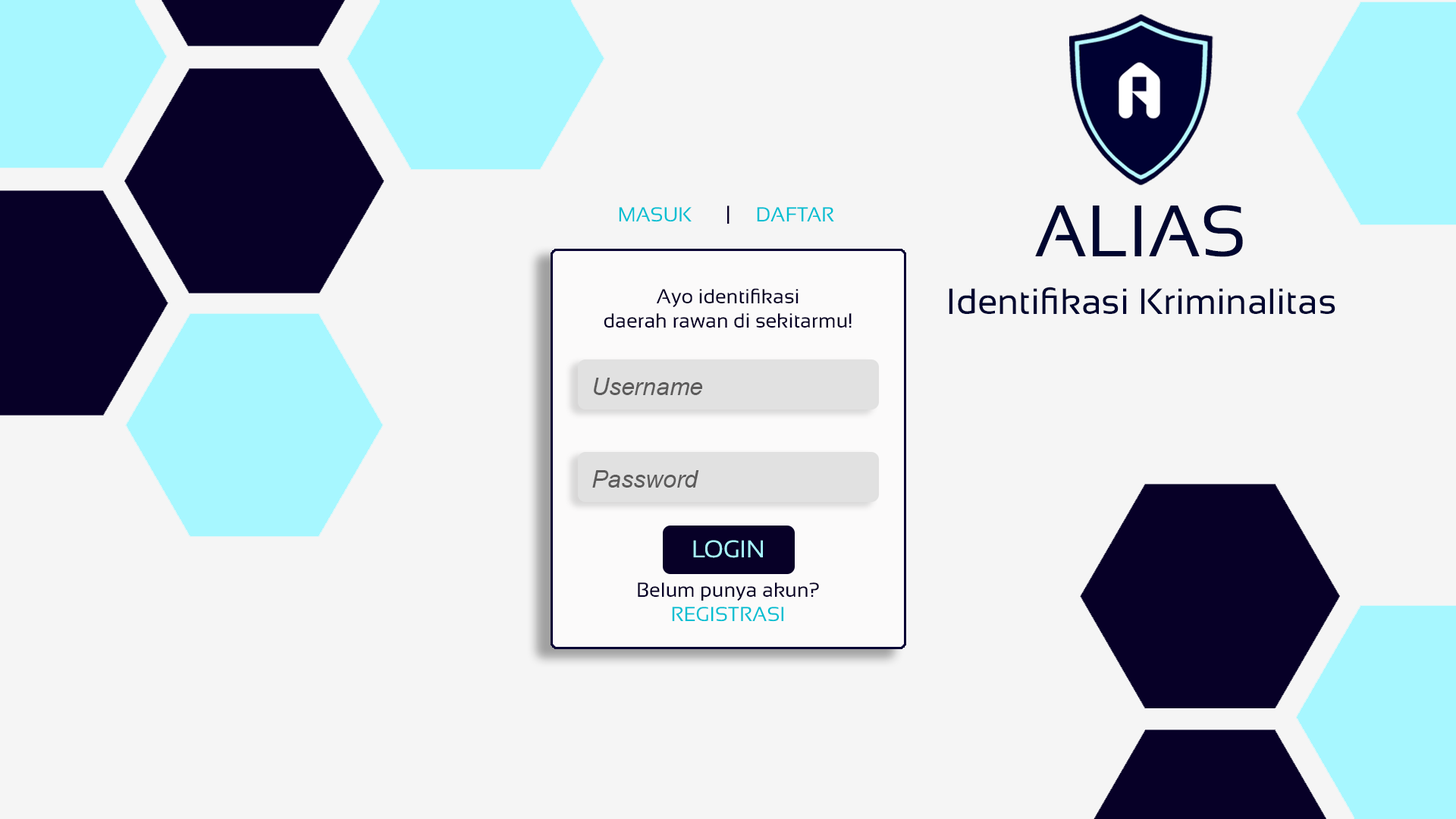
<style>
.page{position:relative;width:1456px;height:819px;background:#f5f5f5}
.page>*{position:absolute;margin:0}
.t1{font:20.2px "Sansation-Regular";color:#00bfd2}
.t2{font:20.2px "Sansation-Regular";color:#070027}
.t3{font:72.8px "Sansation-Regular";color:#000630}
.t4{font:36.4px "Sansation-Regular";color:#000630}
.t5{font:24.3px "Arial-ItalicMT";color:#5c5b5b}
.t6{font:24.3px "Sansation-Regular";color:#a7f7ff}
</style>
<div class="page">
<p class="t1" style="left:619px;top:207px;width:73px;height:15px">MASUK</p>
<p class="t2" style="left:727px;top:206px;width:3px;height:18px">|</p>
<p class="t1" style="left:757px;top:207px;width:77px;height:14px">DAFTAR</p>
<p class="t3" style="left:1035px;top:205px;width:208px;height:52px">ALIAS</p>
<p class="t2" style="left:604px;top:288px;width:248px;height:40px;text-align:center">Ayo identifikasi<br>daerah rawan di sekitarmu!</p>
<p class="t4" style="left:949px;top:287px;width:386px;height:27px">Identifikasi Kriminalitas</p>
<p class="t5" style="left:594px;top:378px;width:109px;height:17px">Username</p>
<p class="t5" style="left:592px;top:470px;width:107px;height:18px">Password</p>
<p class="t6" style="left:693px;top:540px;width:70px;height:18px">LOGIN</p>
<p class="t2" style="left:638px;top:582px;width:181px;height:19px">Belum punya akun?</p>
<p class="t1" style="left:672px;top:607px;width:111px;height:15px">REGISTRASI</p>
</div>
